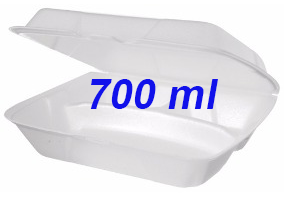
<style>
.page{position:relative;width:284px;height:204px;background:#fefefe}
.page>*{position:absolute;margin:0}
.t1{font:72px "Arial-BoldMT";color:#1111ea;font-style:italic}
</style>
<div class="page">
<p class="t1" style="left:90px;top:79px;width:128px;height:30px">700 ml</p>
</div>
